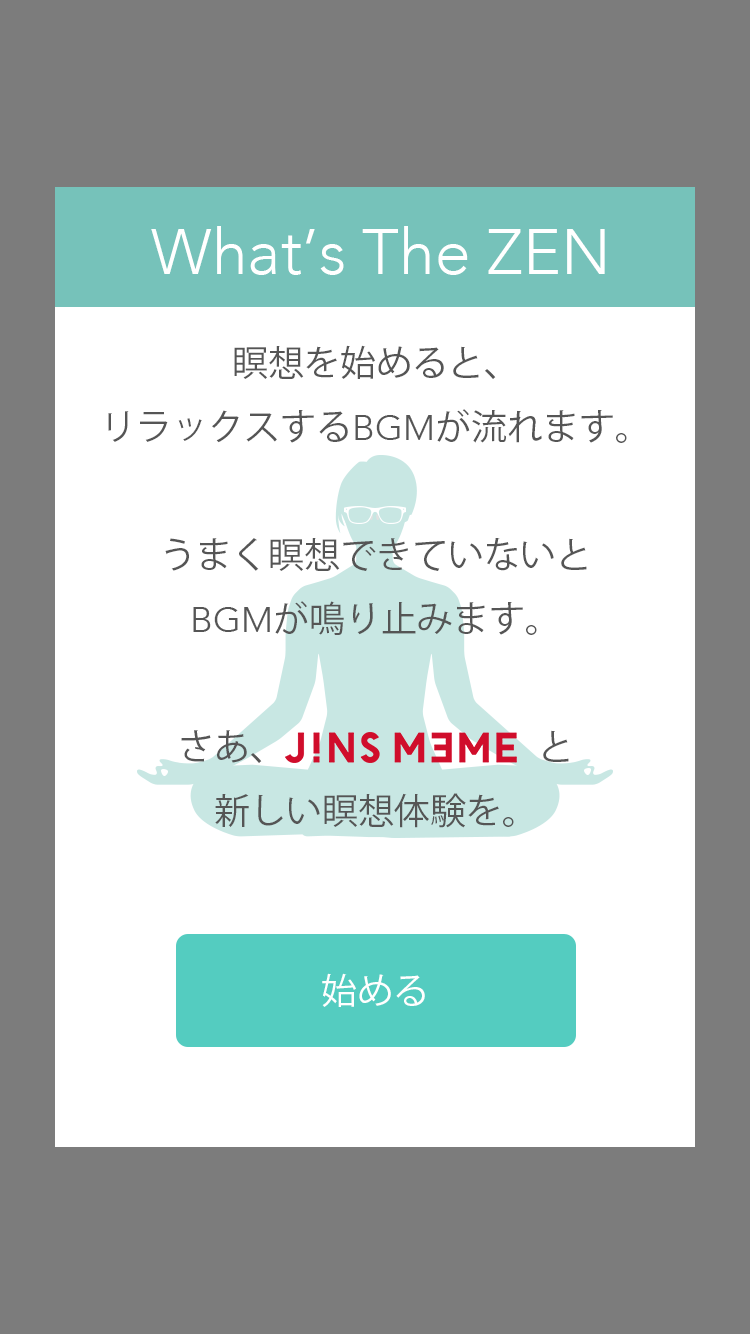
<style>
.page{position:relative;width:750px;height:1334px;background:#ffffff}
.page>*{position:absolute;margin:0}
.t1{font:64px "Avenir-Light";color:#ffffff}
.t2{font:36px/64px "KozGoPr6N-Regular";color:#555555}
.t3{font:36px/64px "Avenir-Light";color:#555555}
.t4{font:36px "KozGoPr6N-Regular";color:#ffffff}
</style>
<div class="page">
<p class="t1" style="left:151px;top:226px;width:454px;height:49px">What’s The ZEN</p>
<p class="t2" style="left:108px;top:345px;width:519px;height:483px;text-align:center">瞑想を始めると、<br>リラックスする<span class="t3">BGM</span>が流れます。<br><br>うまく瞑想できていないと<br><span class="t3">BGM</span>が鳴り止みます。<br><br>さあ、　　　　　　　と<br>新しい瞑想体験を。</p>
<p class="t4" style="left:322px;top:973px;width:103px;height:34px">始める</p>
</div>
